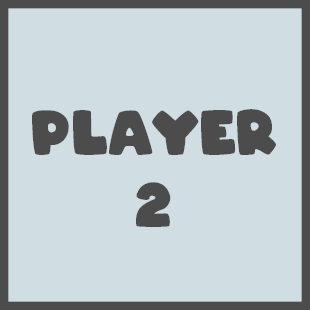
<style>
.page{position:relative;width:310px;height:310px;background:#d0dee4}
.page>*{position:absolute;margin:0}
.t1{font:60px "ARCO-Typography-Regular";color:#4c4c4c}
</style>
<div class="page">
<p class="t1" style="left:32px;top:109px;width:244px;height:118px;text-align:center">player <br>2</p>
</div>
